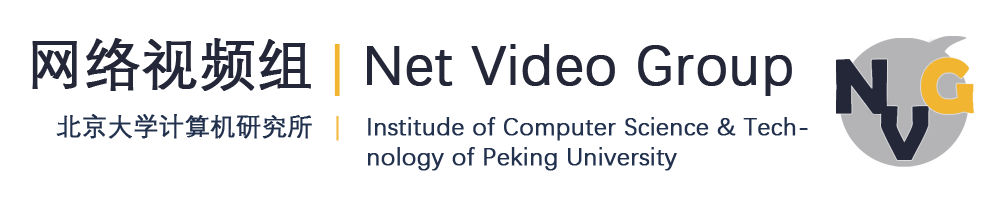
<style>
.page{position:relative;width:1004px;height:200px;background:#ffffff}
.page>*{position:absolute;margin:0}
.t1{font:56px "DengXian-Regular";color:#242738;font-weight:bold}
.t2{font:56px "DengXian-Regular";color:#f1b531;font-weight:bold}
.t3{font:25px "DengXian-Regular";color:#22314e;font-weight:bold}
.t4{font:27px "DengXian-Regular";color:#f3bd48;font-weight:bold}
.t5{font:25px/30px "DengXian-Regular";color:#22314e;font-weight:bold}
</style>
<div class="page">
<p class="t1" style="left:32px;top:38px;width:760px;height:58px">网络视频组 <span class="t2">|</span> Net Video Group</p>
<p class="t3" style="left:56px;top:114px;width:256px;height:25px">北京大学计算机研究所</p>
<p class="t4" style="left:336px;top:116px;width:3px;height:25px">|</p>
<p class="t5" style="left:368px;top:117px;width:440px;height:54px">Institude of Computer Science &amp; Technology of Peking University</p>
</div>
